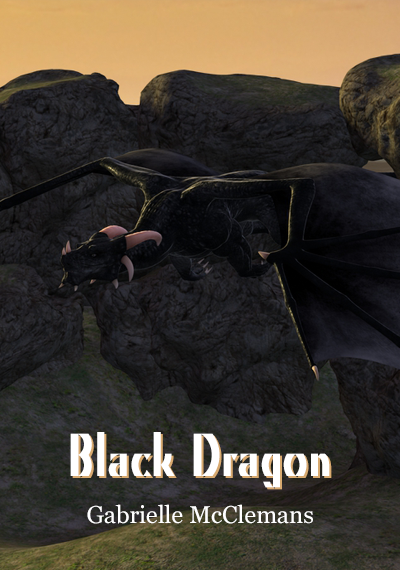
<style>
.page{position:relative;width:400px;height:570px}
.page>*{position:absolute;margin:0}
.t1{font:60px "KinoMT";color:#ffffff}
.t2{font:60px "KinoMT"}
.t3{font:24px "Georgia";color:#ffffff}
</style>
<div class="page">
<p class="t1" style="left:70px;top:432px;width:260px;height:56px">Black Dragon</p>
<p class="t2" style="left:72px;top:434px;width:260px;height:56px">Black Dragon</p>
<p class="t3" style="left:87px;top:504px;width:226px;height:20px">Gabrielle McClemans</p>
</div>
